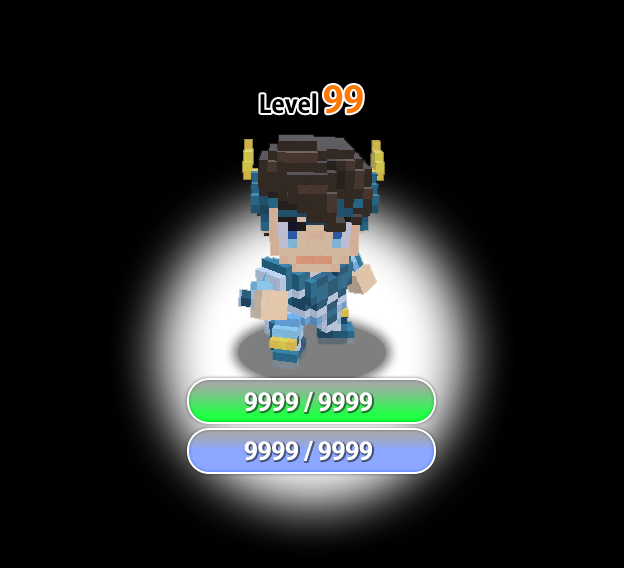
<style>
.page{position:relative;width:624px;height:568px;background:#000000}
.page>*{position:absolute;margin:0}
.t1{font:24px "AdobeGothicStd-Bold";color:#000000}
.t2{font:36px "AdobeGothicStd-Bold";color:#ff7800}
.t3{font:24px "AdobeGothicStd-Bold";color:#ffffff}
</style>
<div class="page">
<p class="t1" style="left:260px;top:85px;width:103px;height:29px">Level <span class="t2">99</span></p>
<p class="t3" style="left:244px;top:392px;width:128px;height:20px">9999 / 9999</p>
<p class="t3" style="left:244px;top:441px;width:128px;height:20px">9999 / 9999</p>
</div>
